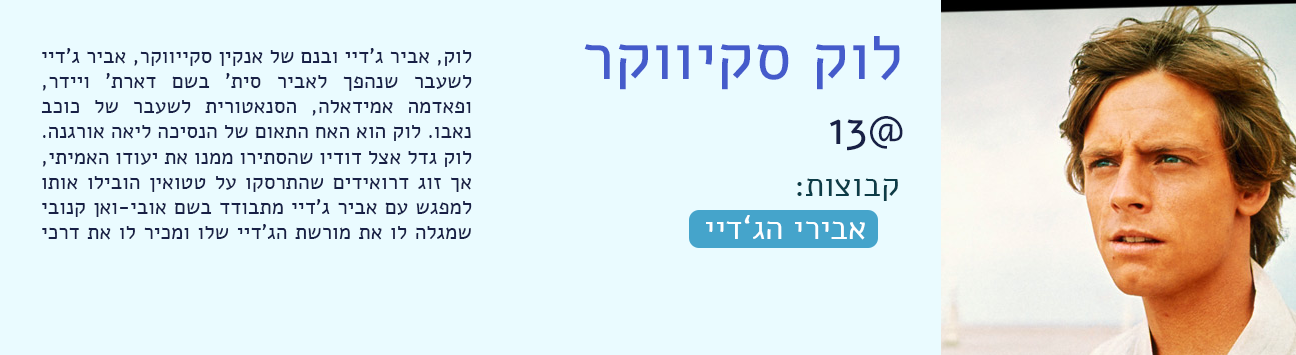
<style>
.page{position:relative;width:1296px;height:355px;background:#eafbff}
.page>*{position:absolute;margin:0}
.t1{font:66.7px "Alef-Regular";color:#455bcb}
.t2{font:21px "Alef-Regular";color:#182046}
.t3{font:46.4px "Alef-Regular";color:#192045}
.t4{font:33px "Alef-Regular";color:#0c3b46}
.t5{font:33px "Alef-Regular";color:#ffffff}
</style>
<div class="page">
<p class="t1" style="left:584px;top:36px;width:316px;height:54px">לוק סקיווקר</p>
<p class="t2" style="left:41px;top:48px;width:431px;height:192px;text-align:justify">לוק, אביר ג'דיי ובנם של אנקין סקייווקר, אביר ג'דיי לשעבר שנהפך לאביר סית' בשם דארת' ויידר, ופאדמה אמידאלה, הסנאטורית לשעבר של כוכב נאבו. לוק הוא האח התאום של הנסיכה ליאה אורגנה. לוק גדל אצל דודיו שהסתירו ממנו את יעודו האמיתי, אך זוג דרואידים שהתרסקו על טטואין הובילו אותו למפגש עם אביר ג'דיי מתבודד בשם אובי-ואן קנובי שמגלה לו את מורשת הג'דיי שלו ומכיר לו את דרכי ה"כוח".</p>
<p class="t3" style="left:830px;top:116px;width:73px;height:35px">@13</p>
<p class="t4" style="left:797px;top:178px;width:101px;height:23px">קבוצות:</p>
<p class="t5" style="left:706px;top:215px;width:159px;height:25px">אבירי הג’דיי</p>
</div>
